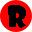
<style>
.page{position:relative;width:32px;height:32px;background:#ff0000}
.page>*{position:absolute;margin:0}
.t1{font:28.3px "ShowcardGothic-Reg";color:#000000}
</style>
<div class="page">
<p class="t1" style="left:8px;top:5px;width:18px;height:23px">R</p>
</div>
